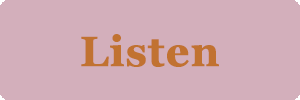
<style>
.page{position:relative;width:300px;height:100px;background:#d3afbb}
.page>*{position:absolute;margin:0}
.t1{font:41.7px "Georgia-Bold";color:#c17231;font-weight:bold}
</style>
<div class="page">
<p class="t1" style="left:81px;top:34px;width:138px;height:33px">Listen</p>
</div>
